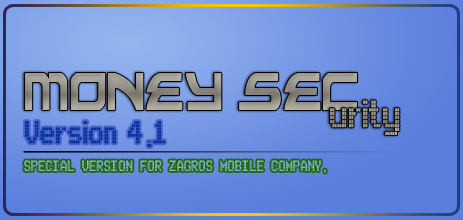
<style>
.page{position:relative;width:463px;height:220px}
.page>*{position:absolute;margin:0}
.t1{font:98.5px "Alexis";color:#9c9990;scale:0.61 1}
.t2{font:59.1px "Arcade";color:#98958d;scale:0.61 1}
.t3{font:49.3px "Arcade";color:#003399;scale:0.61 1}
.t4{font:23px "Arcade";color:#93bcf6;scale:0.61 1}
</style>
<div class="page">
<p class="t1" style="left:25px;top:73px;width:332px;height:37px">Money Sec</p>
<p class="t2" style="left:330px;top:100px;width:70px;height:35px">urity</p>
<p class="t3" style="left:128px;top:113px;width:39px;height:41px">4.1</p>
<p class="t3" style="left:24px;top:120px;width:93px;height:24px">Version</p>
<p class="t4" style="left:24px;top:160px;width:302px;height:13px">SPECIAL VERSION FOR ZAGROS MOBILE COMPANY.</p>
</div>
